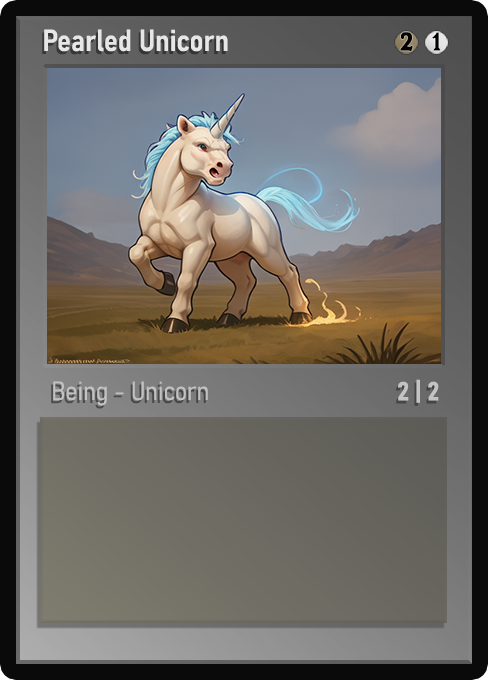
<style>
.page{position:relative;width:488px;height:680px}
.page>*{position:absolute;margin:0}
.t1{font:30px "Bahnschrift-SemiBoldSemiCondensed";color:#f2f2f2;font-weight:bold}
.t2{font:25px "WTRRoycroft";color:#000000;font-weight:bold;scale:1.09 1}
.t3{font:26px "Bahnschrift-LightSemiCondensed";color:#c8c8c8;font-weight:bold}
.t4{font:26px "Bahnschrift-BoldSemiCondensed";color:#c3c3c3;font-weight:bold}
</style>
<div class="page">
<p class="t1" style="left:44px;top:29px;width:184px;height:23px;opacity:0.9">Pearled Unicorn</p>
<p class="t2" style="left:400px;top:32px;width:13px;height:19px">2</p>
<p class="t2" style="left:432px;top:32px;width:9px;height:19px">1</p>
<p class="t3" style="left:53px;top:381px;width:155px;height:25px;opacity:0.9">Being - Unicorn</p>
<p class="t4" style="left:398px;top:379px;width:41px;height:24px">2 | 2</p>
</div>
